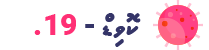
<style>
.page{position:relative;width:209px;height:50px;background:#ffffff}
.page>*{position:absolute;margin:0}
.t1{font:24.8px "MVAaamuFK";color:#353568}
</style>
<div class="page">
<p class="t1" style="left:102px;top:13px;width:39px;height:34px">ްޑިވޮކ</p>
</div>
